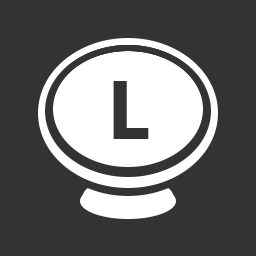
<style>
.page{position:relative;width:256px;height:256px;background:#333333}
.page>*{position:absolute;margin:0}
.t1{font:83.3px "MicrosoftNewTaiLue-Bold";color:#333333}
</style>
<div class="page">
<p class="t1" style="left:113px;top:81px;width:36px;height:58px">L</p>
</div>
